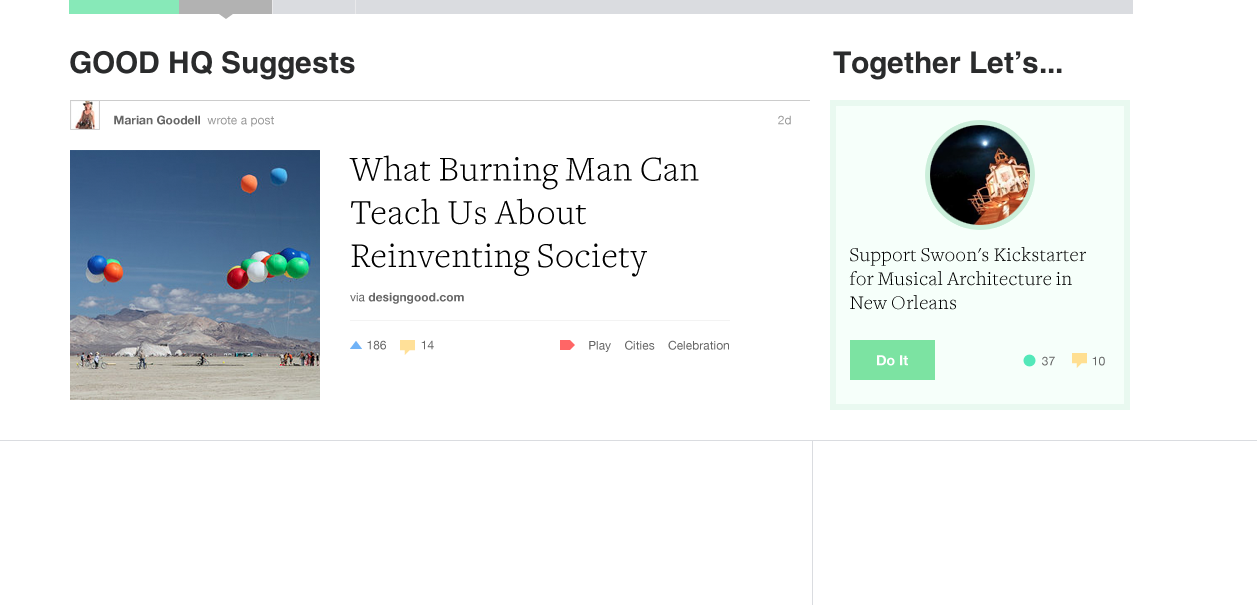
<style>
.page{position:relative;width:1257px;height:605px;background:#ffffff}
.page>*{position:absolute;margin:0}
.t1{font:12px "HelveticaNeue-Bold";color:#666666}
.t2{font:12px "HelveticaNeue";color:#999999}
.t3{font:36px "FreightTextLight";letter-spacing:0.025em;color:#000000}
.t4{font:12px "HelveticaNeue";color:#666666}
.t5{font:20px "FreightTextLight";letter-spacing:0.025em;color:#000000}
.t6{font:12px "HelveticaNeue";color:#666666;text-transform:uppercase}
.t7{font:14px "HelveticaNeue-Bold";letter-spacing:0.005em;color:#ffffff}
</style>
<div class="page">
<p class="t1" style="left:114px;top:115px;width:160px;height:12px">Marian Goodell  <span class="t2">wrote a post</span></p>
<p class="t2" style="left:778px;top:115px;width:13px;height:10px">2d</p>
<p class="t3" style="left:349px;top:155px;width:350px;height:149px">What Burning Man Can Teach Us About Reinventing Society<br><span class="t4">via </span><span class="t1">designgood.com</span></p>
<p class="t5" style="left:849px;top:247px;width:237px;height:63px">Support Swoon's Kickstarter <br>for Musical Architecture in <br>New Orleans</p>
<p class="t6" style="left:367px;top:340px;width:19px;height:10px">186</p>
<p class="t4" style="left:421px;top:340px;width:13px;height:10px">14</p>
<p class="t4" style="left:589px;top:340px;width:140px;height:12px">Play    Cities    Celebration</p>
<p class="t7" style="left:877px;top:355px;width:31px;height:11px">Do It</p>
<p class="t6" style="left:1042px;top:356px;width:13px;height:10px">37</p>
<p class="t4" style="left:1092px;top:356px;width:13px;height:10px">10</p>
</div>
